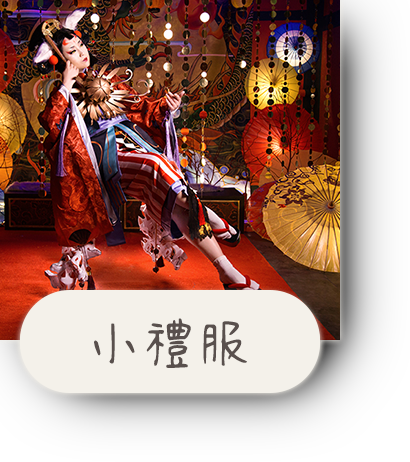
<style>
.page{position:relative;width:410px;height:462px}
.page>*{position:absolute;margin:0}
.t1{font:55px "JasonHandwriting2";color:#59504d}
</style>
<div class="page">
<p class="t1" style="left:94px;top:318px;width:153px;height:50px">小禮服</p>
</div>
